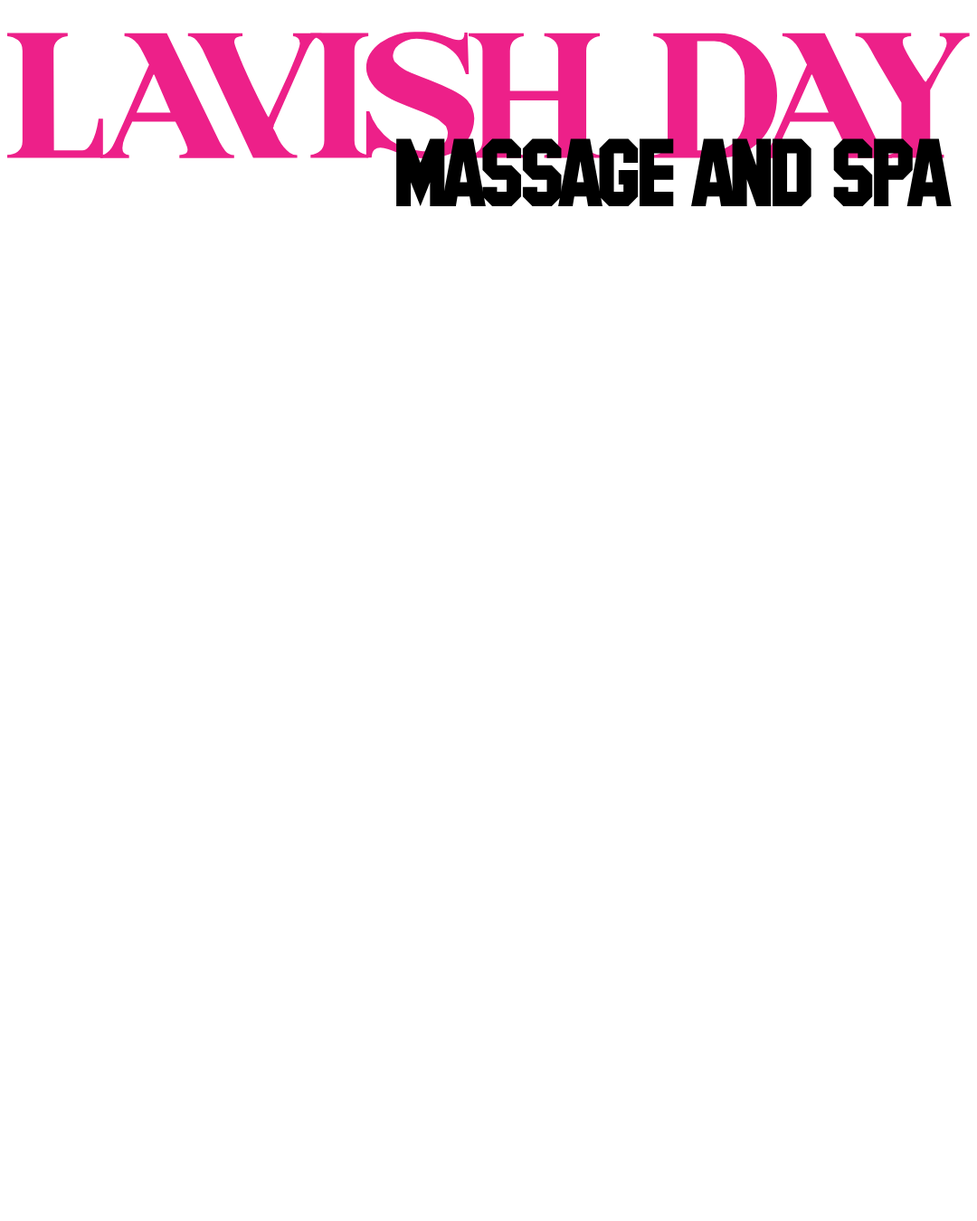
<style>
.page{position:relative;width:977px;height:1221px;background:#ffffff}
.page>*{position:absolute;margin:0}
.t1{font:190.6px "Cosmopolitan-Regular";letter-spacing:-0.082em;color:#ed2089}
.t2{font:96.2px "SFCollegiateSolid";letter-spacing:-0.082em;color:#000000}
</style>
<div class="page">
<p class="t1" style="left:7px;top:32px;width:962px;height:127px">LAVISH DAY</p>
<p class="t2" style="left:396px;top:138px;width:555px;height:68px">MASSAGE AND SPA</p>
</div>
